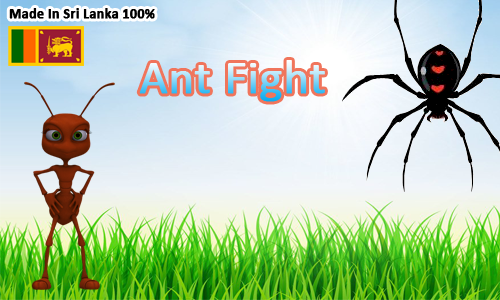
<style>
.page{position:relative;width:500px;height:300px}
.page>*{position:absolute;margin:0}
.t1{font:14px "Calibri-Bold";color:#000000;font-weight:bold}
.t2{font:48px "Calibri";font-weight:bold}
</style>
<div class="page">
<p class="t1" style="left:9px;top:8px;width:146px;height:11px">Made In Sri Lanka 100%</p>
<p class="t2" style="left:139px;top:60px;width:186px;height:42px">Ant Fight</p>
</div>
